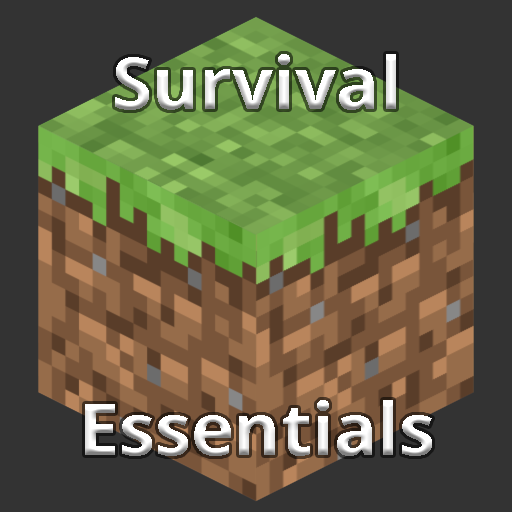
<style>
.page{position:relative;width:512px;height:512px;background:#333333}
.page>*{position:absolute;margin:0}
.t1{font:72px "OpenSans-Bold"}
.t2{font:30px "OpenSans-Bold"}
</style>
<div class="page">
<p class="t1" style="left:85px;top:54px;width:347px;height:402px;text-align:center"><span class="t2"><br></span>Survival<br><br><br><br>Essentials</p>
</div>
